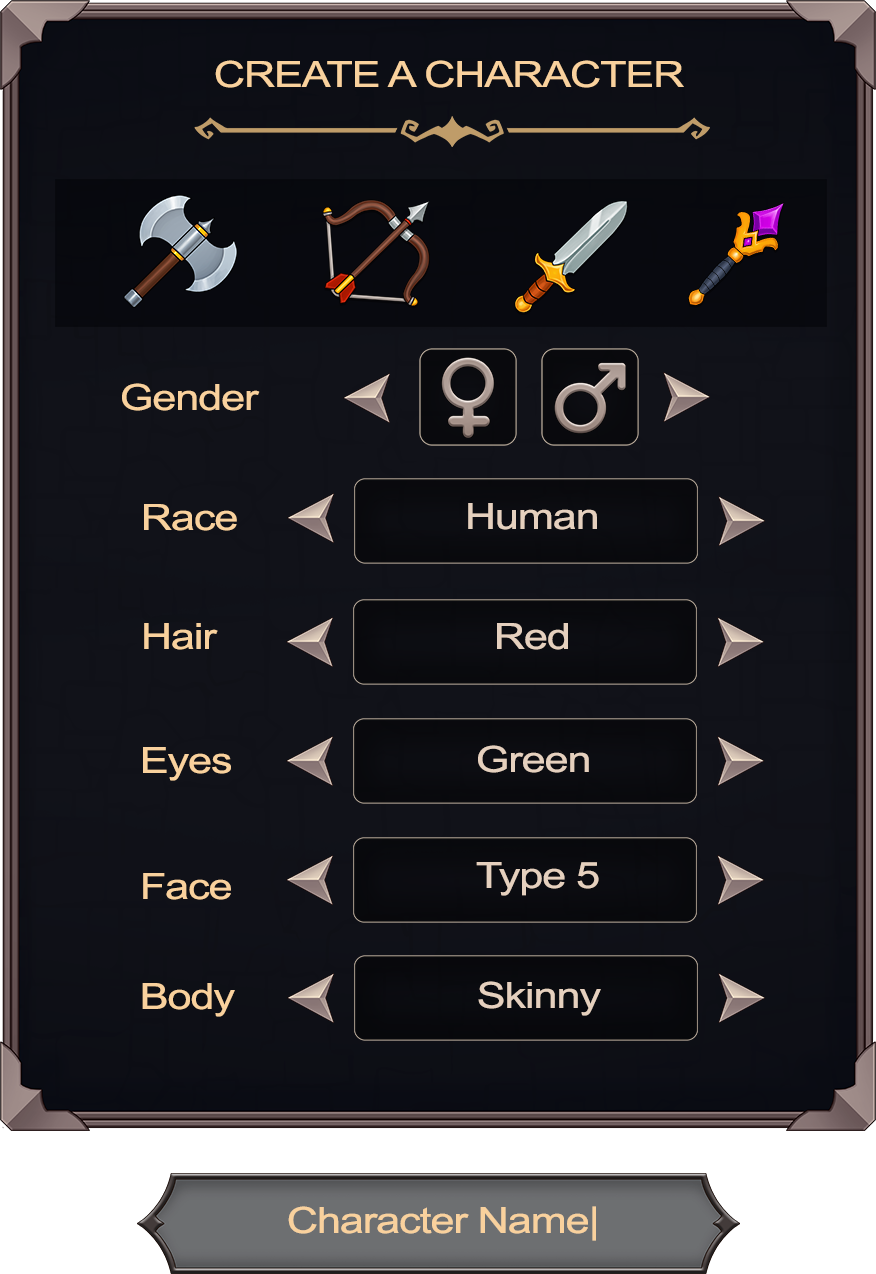
<style>
.page{position:relative;width:876px;height:1274px}
.page>*{position:absolute;margin:0}
.t1{font:36px "ArialMT";letter-spacing:-0.025em;color:#f9d19d;scale:1.2 1}
.t2{font:36px "ArialMT";letter-spacing:-0.025em;color:#e5d0be;scale:1.2 1}
</style>
<div class="page">
<p class="t1" style="left:215px;top:60px;width:469px;height:28px">CREATE A CHARACTER</p>
<p class="t1" style="left:122px;top:383px;width:138px;height:28px">Gender</p>
<p class="t1" style="left:144px;top:504px;width:93px;height:27px">Race</p>
<p class="t2" style="left:468px;top:503px;width:129px;height:27px">Human</p>
<p class="t1" style="left:144px;top:623px;width:74px;height:27px">Hair</p>
<p class="t2" style="left:497px;top:623px;width:71px;height:27px">Red</p>
<p class="t1" style="left:143px;top:747px;width:88px;height:34px">Eyes</p>
<p class="t2" style="left:478px;top:745px;width:111px;height:28px">Green</p>
<p class="t2" style="left:476px;top:862px;width:123px;height:34px">Type 5</p>
<p class="t1" style="left:143px;top:873px;width:88px;height:27px">Face</p>
<p class="t1" style="left:142px;top:983px;width:93px;height:34px">Body</p>
<p class="t2" style="left:478px;top:981px;width:123px;height:35px">Skinny</p>
<p class="t1" style="left:288px;top:1206px;width:308px;height:35px">Character Name|</p>
</div>
